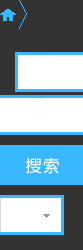
<style>
.page{position:relative;width:83px;height:250px;background:#333333}
.page>*{position:absolute;margin:0}
.t1{font:17px "FZY3JW--GB1-0";letter-spacing:0.08em;color:#ffffff;scale:0.95 1}
</style>
<div class="page">
<p class="t1" style="left:26px;top:157px;width:33px;height:17px">搜索</p>
</div>
